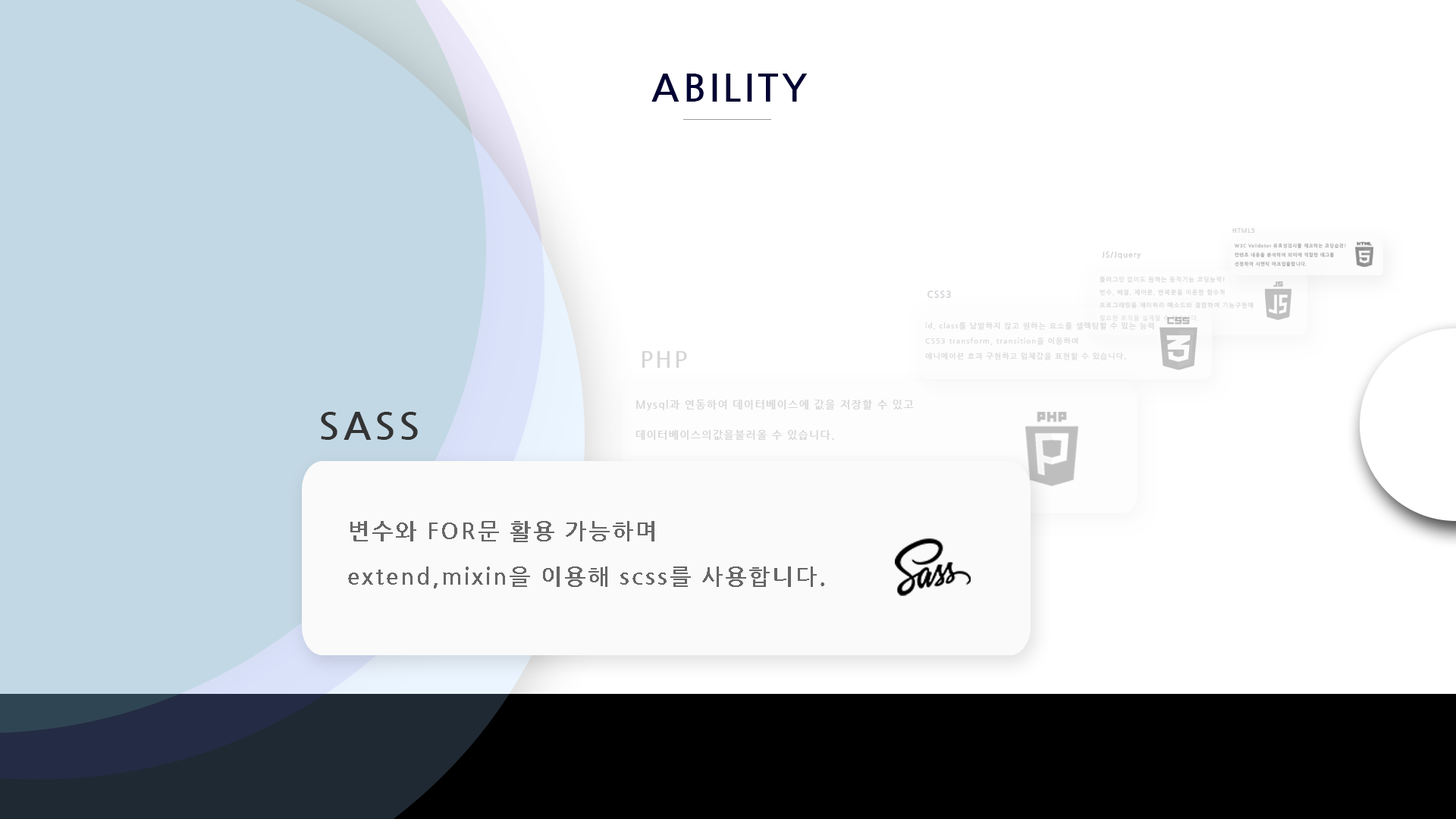
<style>
.page{position:relative;width:1456px;height:819px;background:#ffffff}
.page>*{position:absolute;margin:0}
.t1{font:37.9px "NanumGothicBold";letter-spacing:0.1em;color:#000033}
.t2{font:6.1px "NanumGothicBold";letter-spacing:0.1em;color:#d0d0d5}
.t3{font:4.5px/9.2px "NanumGothicBold";letter-spacing:0.1em;color:#b2b2b2}
.t4{font:7.6px "NanumGothicBold";letter-spacing:0.1em;color:#d1d1d6}
.t5{font:6.1px/12.7px "NanumGothicBold";letter-spacing:0.1em;color:#dcdcdc}
.t6{font:9.1px "NanumGothicBold";letter-spacing:0.1em;color:#d1d1d6}
.t7{font:7.6px/15.2px "NanumGothicBold";letter-spacing:0.1em;color:#dcdcdc}
.t8{font:22.7px "NanumGothicBold";letter-spacing:0.1em;color:#d6d6d6}
.t9{font:10.6px/15.2px "NanumGothicBold";letter-spacing:0.1em;color:#d5d5d5}
.t10{font:37.9px "NanumGothicBold";letter-spacing:0.1em;color:#333333}
.t11{font:22.7px/15.2px "NanumGothicBold";letter-spacing:0.1em;color:#666666}
.t12{font:30.3px/15.2px "NanumGothicBold";letter-spacing:0.1em;color:#333333}
</style>
<div class="page">
<p class="t1" style="left:651px;top:74px;width:156px;height:28px">ABILITY</p>
<p class="t2" style="left:1232px;top:228px;width:23px;height:5px">HTML5</p>
<p class="t3" style="left:1235px;top:243px;width:111px;height:24px">W3C Validator 유효성검사를 체크하는 코딩습관!<br>컨텐츠 내용을 분석하여 의미에 적합한 태그를<br>선정하여 시멘틱 마크업을합니다.</p>
<p class="t4" style="left:1102px;top:251px;width:39px;height:8px">JS/Jquery</p>
<p class="t5" style="left:1100px;top:276px;width:154px;height:46px">플러그인 없이도 원하는 동적기능 코딩능력!<br>변수, 배열, 제어문, 반복문을 이용한 함수적<br>프로그래밍을 제이쿼리 메소드와 결합하여 기능구현에 <br>필요한 로직을 설계할 수 있습니다.</p>
<p class="t6" style="left:927px;top:290px;width:24px;height:8px">CSS3</p>
<p class="t7" style="left:925px;top:322px;width:229px;height:38px">id, class를 남발하지 않고 원하는 요소를 셀렉팅할 수 있는 능력<br>CSS3 transform, transition을 이용하여 <br>애니메이션 효과 구현하고 입체감을 표현할 수 있습니다.</p>
<p class="t8" style="left:642px;top:351px;width:45px;height:17px">PHP</p>
<p class="t9" style="left:635px;top:399px;width:279px;height:42px">Mysql과 연동하여 데이터베이스에 값을 저장할 수 있고<br><br>데이터베이스의값을불러올 수 있습니다.</p>
<p class="t10" style="left:321px;top:412px;width:97px;height:28px">SASS</p>
<p class="t11" style="left:348px;top:521px;width:476px;height:67px"><span class="t12"><br></span>변수와 FOR문 활용 가능하며<br><br>  <br>extend,mixin을 이용해 scss를 사용합니다.</p>
</div>
